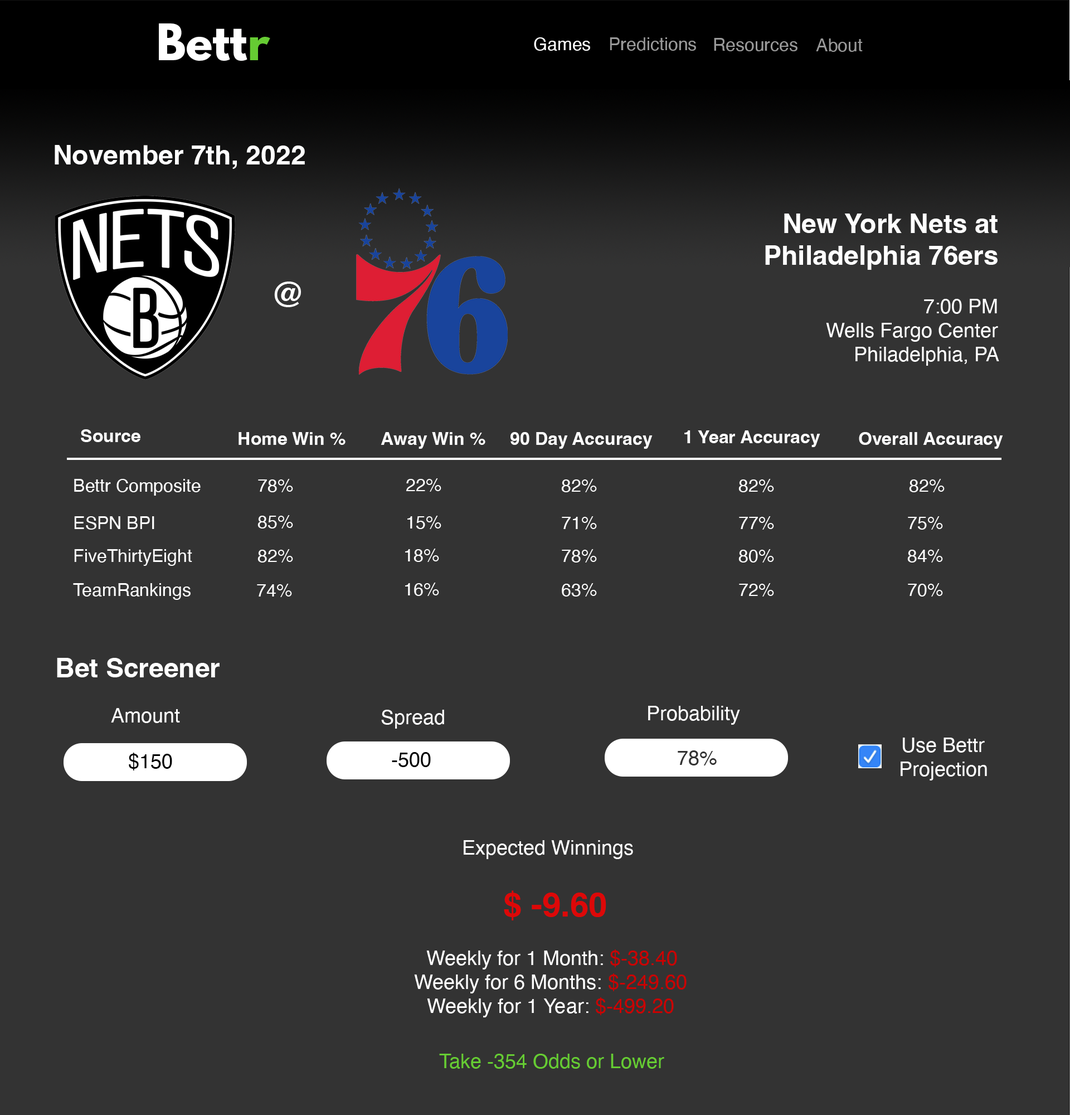
<style>
.page{position:relative;width:1070px;height:1115px;background:#333333}
.page>*{position:absolute;margin:0}
.t1{font:44.6px "LeagueSpartan-Bold";color:#ffffff}
.t2{font:44.6px "LeagueSpartan-Bold";color:#66cc33}
.t3{font:17.8px "Helvetica";color:#ffffff}
.t4{font:17.8px "Helvetica";color:#999999}
.t5{font:26.7px "Helvetica-Bold";color:#ffffff}
.t6{font:20.1px "Helvetica";color:#ffffff}
.t7{font:26.7px "Helvetica";color:#ffffff}
.t8{font:33.4px "Helvetica-Bold";color:#ffffff}
.t9{font:17.8px "Helvetica-Bold";color:#ffffff}
.t10{font:20.1px "Helvetica";color:#000000}
.t11{font:20.1px "Helvetica";color:#333333}
.t12{font:33.4px "Helvetica-Bold";color:#dd0808}
.t13{font:20.1px "Helvetica";color:#cc0000}
.t14{font:20.1px "Helvetica";color:#66cc33}
</style>
<div class="page">
<p class="t1" style="left:159px;top:23px;width:111px;height:38px">Bett<span class="t2">r</span></p>
<p class="t3" style="left:534px;top:37px;width:56px;height:14px">Games</p>
<p class="t4" style="left:610px;top:37px;width:86px;height:14px">Predictions</p>
<p class="t4" style="left:714px;top:38px;width:83px;height:13px">Resources</p>
<p class="t4" style="left:816px;top:38px;width:47px;height:14px">About</p>
<p class="t5" style="left:55px;top:145px;width:250px;height:24px">November 7th, 2022</p>
<p class="t6" style="left:765px;top:213px;width:234px;height:153px;text-align:right"><span class="t7">  </span><span class="t5">New York Nets at<br>  Philadelphia 76ers<br></span><br>   7:00 PM<br>   Wells Fargo Center<br>  Philadelphia, PA</p>
<p class="t8" style="left:274px;top:281px;width:27px;height:26px">@</p>
<p class="t9" style="left:81px;top:429px;width:59px;height:13px">Source</p>
<p class="t9" style="left:239px;top:432px;width:106px;height:13px">Home Win %</p>
<p class="t9" style="left:381px;top:432px;width:104px;height:17px">Away Win %</p>
<p class="t9" style="left:510px;top:432px;width:143px;height:17px">90 Day Accuracy</p>
<p class="t9" style="left:684px;top:430px;width:136px;height:17px">1 Year Accuracy</p>
<p class="t9" style="left:859px;top:432px;width:144px;height:17px">Overall Accuracy</p>
<p class="t3" style="left:74px;top:479px;width:127px;height:16px">Bettr Composite</p>
<p class="t3" style="left:258px;top:479px;width:35px;height:13px">78%</p>
<p class="t3" style="left:406px;top:478px;width:35px;height:13px">22%</p>
<p class="t3" style="left:561px;top:479px;width:36px;height:13px">82%</p>
<p class="t3" style="left:738px;top:479px;width:36px;height:13px">82%</p>
<p class="t3" style="left:909px;top:479px;width:36px;height:13px">82%</p>
<p class="t3" style="left:74px;top:516px;width:80px;height:13px">ESPN BPI</p>
<p class="t3" style="left:257px;top:515px;width:36px;height:13px">85%</p>
<p class="t3" style="left:407px;top:515px;width:34px;height:14px">15%</p>
<p class="t3" style="left:562px;top:516px;width:35px;height:13px">71%</p>
<p class="t3" style="left:739px;top:516px;width:35px;height:13px">77%</p>
<p class="t3" style="left:908px;top:516px;width:35px;height:13px">75%</p>
<p class="t3" style="left:74px;top:549px;width:118px;height:17px">FiveThirtyEight</p>
<p class="t3" style="left:257px;top:549px;width:36px;height:13px">82%</p>
<p class="t3" style="left:405px;top:548px;width:34px;height:14px">18%</p>
<p class="t3" style="left:562px;top:549px;width:35px;height:13px">78%</p>
<p class="t3" style="left:738px;top:549px;width:36px;height:13px">80%</p>
<p class="t3" style="left:907px;top:549px;width:36px;height:13px">84%</p>
<p class="t3" style="left:73px;top:583px;width:118px;height:17px">TeamRankings</p>
<p class="t3" style="left:257px;top:583px;width:35px;height:14px">74%</p>
<p class="t3" style="left:405px;top:582px;width:34px;height:14px">16%</p>
<p class="t3" style="left:562px;top:583px;width:35px;height:13px">63%</p>
<p class="t3" style="left:739px;top:583px;width:35px;height:13px">72%</p>
<p class="t3" style="left:908px;top:583px;width:35px;height:13px">70%</p>
<p class="t5" style="left:57px;top:658px;width:163px;height:19px">Bet Screener</p>
<p class="t6" style="left:111px;top:708px;width:69px;height:15px">Amount</p>
<p class="t6" style="left:381px;top:709px;width:63px;height:19px">Spread</p>
<p class="t6" style="left:648px;top:705px;width:92px;height:19px">Probability</p>
<p class="t6" style="left:901px;top:737px;width:86px;height:43px;text-align:center">Use Bettr <br>Projection</p>
<p class="t10" style="left:129px;top:752px;width:43px;height:18px">$150</p>
<p class="t10" style="left:392px;top:752px;width:39px;height:15px">-500</p>
<p class="t11" style="left:678px;top:750px;width:39px;height:15px">78%</p>
<p class="t6" style="left:464px;top:840px;width:169px;height:19px">Expected Winnings</p>
<p class="t12" style="left:504px;top:890px;width:102px;height:30px">$ -9.60</p>
<p class="t6" style="left:414px;top:949px;width:273px;height:68px;text-align:center">Weekly for 1 Month: <span class="t13">$-38.40<br></span>Weekly for 6 Months: <span class="t13">$-249.60<br></span>Weekly for 1 Year: <span class="t13">$-499.20</span></p>
<p class="t14" style="left:439px;top:1053px;width:225px;height:15px">Take -354 Odds or Lower</p>
</div>
